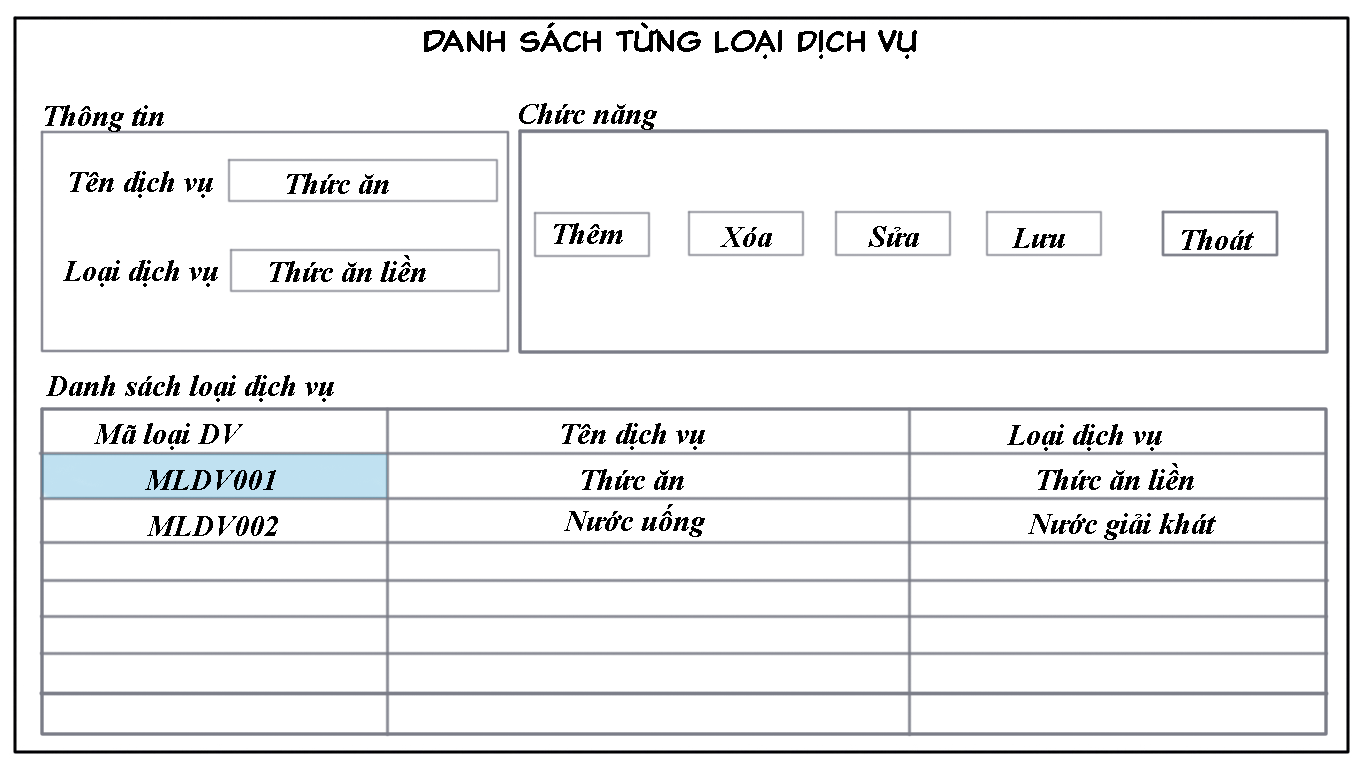
<style>
.page{position:relative;width:1366px;height:768px;background:#ffffff}
.page>*{position:absolute;margin:0}
.t1{font:30px "000ClassicComicTB-Normal";color:#000000}
.t2{font:30px "TimesNewRomanPS-BoldItalicMT";color:#000000}
</style>
<div class="page">
<p class="t1" style="left:424px;top:22px;width:493px;height:37px">Danh sách từng loại dịch vụ</p>
<p class="t2" style="left:45px;top:105px;width:119px;height:27px">Thông tin</p>
<p class="t2" style="left:519px;top:103px;width:138px;height:27px">Chức năng</p>
<p class="t2" style="left:70px;top:171px;width:143px;height:27px">Tên dịch vụ</p>
<p class="t2" style="left:287px;top:173px;width:102px;height:21px">Thức ăn</p>
<p class="t2" style="left:554px;top:223px;width:69px;height:21px">Thêm</p>
<p class="t2" style="left:720px;top:227px;width:52px;height:20px">Xóa</p>
<p class="t2" style="left:868px;top:226px;width:51px;height:21px">Sửa</p>
<p class="t2" style="left:1012px;top:228px;width:53px;height:20px">Lưu</p>
<p class="t2" style="left:1182px;top:229px;width:72px;height:21px">Thoát</p>
<p class="t2" style="left:270px;top:255px;width:156px;height:27px">Thức ăn liền</p>
<p class="t2" style="left:63px;top:260px;width:155px;height:27px">Loại dịch vụ</p>
<p class="t2" style="left:46px;top:375px;width:288px;height:27px">Danh sách loại dịch vụ</p>
<p class="t2" style="left:94px;top:423px;width:149px;height:27px">Mã loại DV</p>
<p class="t2" style="left:562px;top:423px;width:143px;height:27px">Tên dịch vụ</p>
<p class="t2" style="left:1007px;top:424px;width:155px;height:27px">Loại dịch vụ</p>
<p class="t2" style="left:145px;top:470px;width:131px;height:20px">MLDV001</p>
<p class="t2" style="left:582px;top:469px;width:102px;height:21px">Thức ăn</p>
<p class="t2" style="left:1038px;top:463px;width:156px;height:27px">Thức ăn liền</p>
<p class="t2" style="left:564px;top:504px;width:141px;height:33px">Nước uống</p>
<p class="t2" style="left:147px;top:516px;width:131px;height:20px">MLDV002</p>
<p class="t2" style="left:1028px;top:513px;width:188px;height:27px">Nước giải khát</p>
</div>
